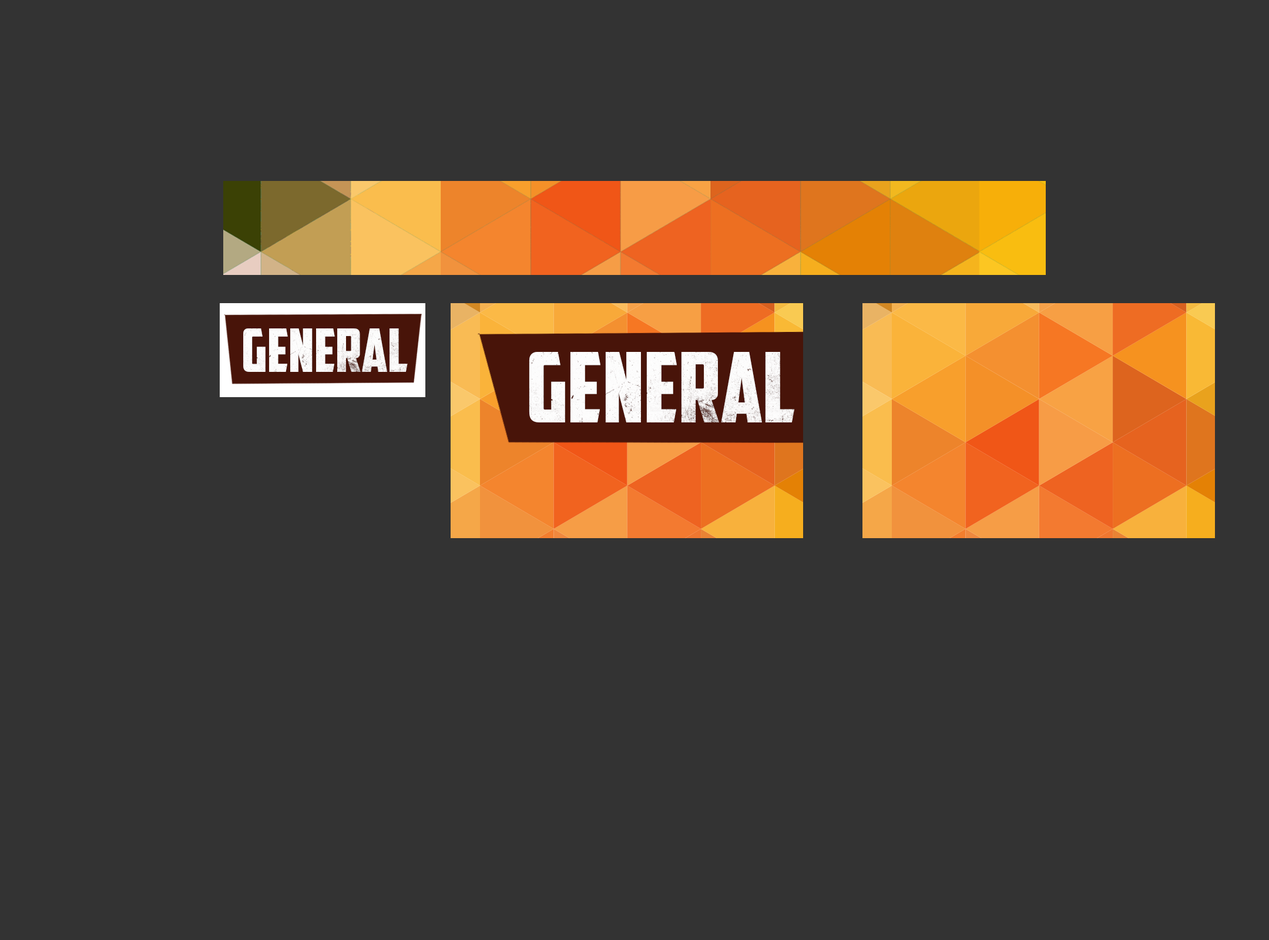
<style>
.page{position:relative;width:1269px;height:940px;background:#333333}
.page>*{position:absolute;margin:0}
.t1{font:60.2px "AmericanCaptain";color:#ffffff}
.t2{font:97.5px "AmericanCaptain";color:#ffffff}
</style>
<div class="page">
<p class="t1" style="left:243px;top:328px;width:165px;height:44px">GENERAL</p>
<p class="t2" style="left:529px;top:352px;width:265px;height:70px">GENERAL</p>
</div>
